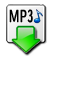
<style>
.page{position:relative;width:65px;height:86px;background:#ffffff}
.page>*{position:absolute;margin:0}
.t1{font:17.8px "LMSans10-Bold";color:#000000;font-weight:bold;scale:0.6 1}
</style>
<div class="page">
<p class="t1" style="left:9px;top:9px;width:24px;height:14px">MP3</p>
</div>
